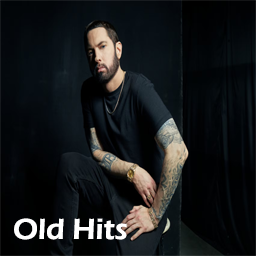
<style>
.page{position:relative;width:256px;height:256px}
.page>*{position:absolute;margin:0}
.t1{font:30px "ErasITC-Demi";color:#ffffff}
</style>
<div class="page">
<p class="t1" style="left:14px;top:218px;width:113px;height:22px">Old Hits</p>
</div>
